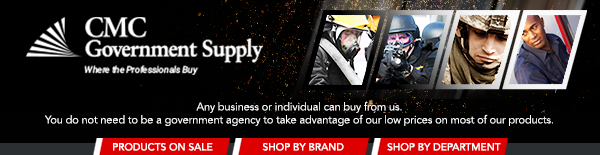
<style>
.page{position:relative;width:600px;height:155px}
.page>*{position:absolute;margin:0}
.t1{font:10.9px "AvenirLTPro-Light";color:#fffefe}
.t2{font:10.1px "AvenirLTPro-Medium";color:#ffffff}
</style>
<div class="page">
<p class="t1" style="left:45px;top:101px;width:508px;height:25px;text-align:center">Any business or individual can buy from us.<br>You do not need to be a government agency to take advantage of our low prices on most of our products.</p>
<p class="t2" style="left:113px;top:143px;width:100px;height:8px">PRODUCTS ON SALE</p>
<p class="t2" style="left:262px;top:143px;width:82px;height:8px">SHOP BY BRAND</p>
<p class="t2" style="left:387px;top:143px;width:114px;height:8px">SHOP BY DEPARTMENT</p>
</div>
